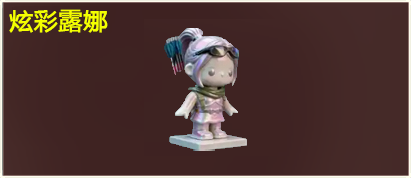
<style>
.page{position:relative;width:411px;height:178px}
.page>*{position:absolute;margin:0}
.t1{font:24px "MicrosoftYaHei";color:#f4ff00;font-weight:bold}
</style>
<div class="page">
<p class="t1" style="left:9px;top:9px;width:99px;height:24px">炫彩露娜</p>
</div>
